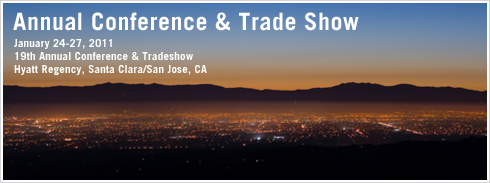
<style>
.page{position:relative;width:490px;height:183px}
.page>*{position:absolute;margin:0}
.t1{font:24px "TradeGothicLTStd-Bold";letter-spacing:0.02em;color:#ffffff}
.t2{font:11px "TradeGothicLTStd-Bold";letter-spacing:0.02em;color:#ffffff}
</style>
<div class="page">
<p class="t1" style="left:13px;top:12px;width:346px;height:19px">Annual Conference &amp; Trade Show</p>
<p class="t2" style="left:14px;top:39px;width:193px;height:36px">January 24-27, 2011<br>19th Annual Conference &amp; Tradeshow<br>Hyatt Regency, Santa Clara/San Jose, CA</p>
</div>
